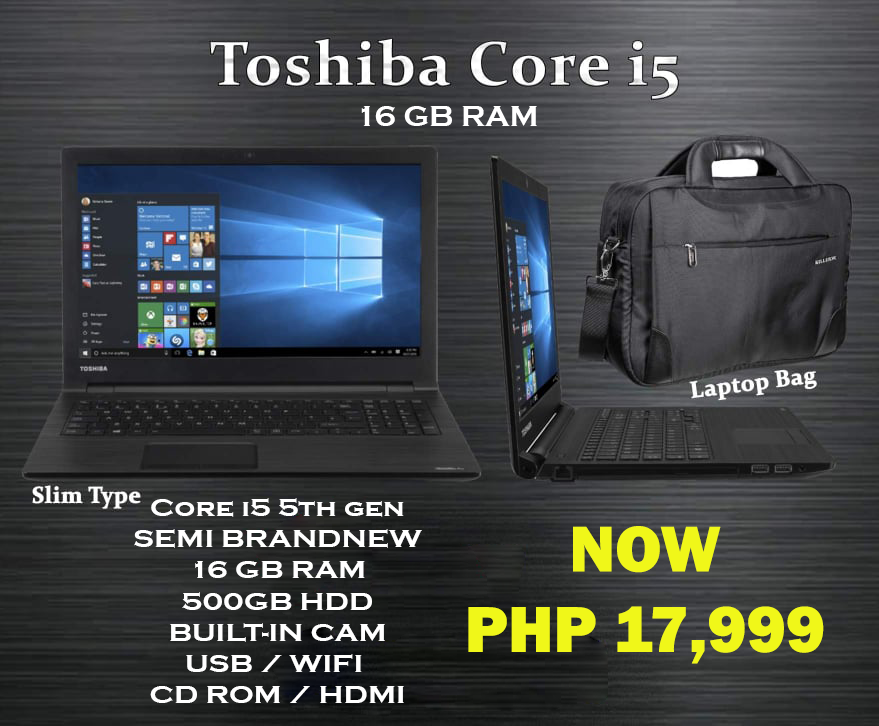
<style>
.page{position:relative;width:879px;height:726px}
.page>*{position:absolute;margin:0}
.t1{font:30px "CopperplateGothic-Bold";color:#ffffff}
.t2{font:26px "CopperplateGothic-Bold";color:#ffffff;scale:1.12 1}
.t3{font:67px "FranklinGothic-Heavy";color:#f0f719}
</style>
<div class="page">
<p class="t1" style="left:361px;top:106px;width:176px;height:20px">16 GB RAM</p>
<p class="t2" style="left:134px;top:498px;width:288px;height:205px;text-align:center">Core i5 5th gen<br>SEMI BRANDNEW<br>16 GB RAM<br>500GB HDD<br>BUILT-IN CAM<br>USB / WIFI <br>CD ROM / HDMI</p>
<p class="t3" style="left:468px;top:526px;width:356px;height:138px;text-align:center">NOW<br>PHP 17,999</p>
</div>
